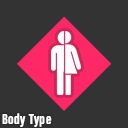
<style>
.page{position:relative;width:128px;height:128px;background:#333333}
.page>*{position:absolute;margin:0}
.t1{font:15px "AcuminConcept-ExtraCondensedBold";letter-spacing:0.04em;color:#ffffff}
</style>
<div class="page">
<p class="t1" style="left:2px;top:113px;width:50px;height:14px">Body Type</p>
</div>
